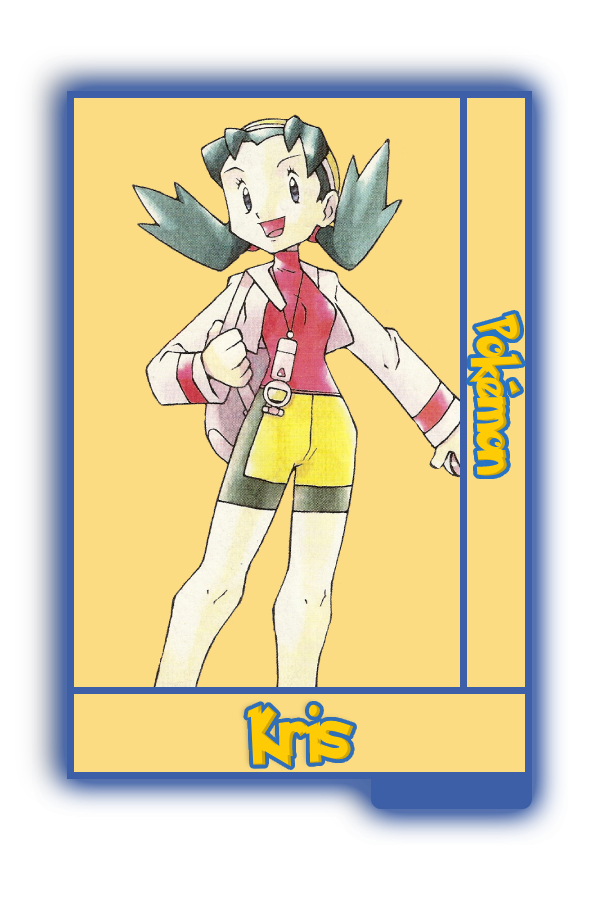
<style>
.page{position:relative;width:600px;height:900px;background:#fbdc83}
.page>*{position:absolute;margin:0}
.t1{font:48.8px "PokemonSolidNormal";color:#ffcb05;scale:0.8 1}
.t2{font:56.6px "PokemonSolidNormal";color:#ffcb05;scale:0.92 1}
</style>
<div class="page">
<p class="t1" style="left:469px;top:313px;width:54px;height:163px;rotate:90deg">Pokémon</p>
<p class="t2" style="left:247px;top:704px;width:107px;height:63px">Kris</p>
</div>
